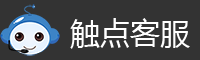
<style>
.page{position:relative;width:200px;height:60px;background:#333333}
.page>*{position:absolute;margin:0}
.t1{font:30px "MicrosoftYaHei";color:#ffffff}
</style>
<div class="page">
<p class="t1" style="left:70px;top:18px;width:120px;height:31px">触点客服</p>
</div>
